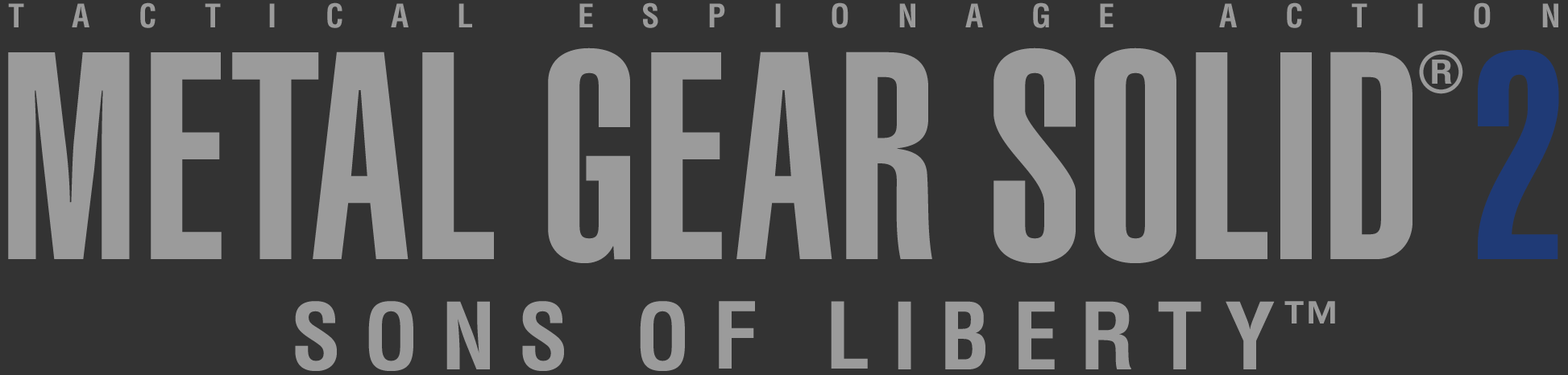
<style>
.page{position:relative;width:1568px;height:375px;background:#333333}
.page>*{position:absolute;margin:0}
.t1{font:31.6px "Helvetica-Condensed-Bold";letter-spacing:0.048em;color:#9b9b9b}
.t2{font:291px "Helvetica-UltraCompressed";letter-spacing:0.048em;color:#9b9b9b}
.t3{font:54.9px "Helvetica-Condensed-Bold";letter-spacing:0.048em;color:#9b9b9b}
.t4{font:291px "Helvetica-UltraCompressed";letter-spacing:0.048em;color:#1f3a76}
.t5{font:32.2px "Helvetica-Condensed-Bold";letter-spacing:0.048em;color:#9b9b9b;scale:1.21 1}
.t6{font:89px "Helvetica-Condensed-Bold";letter-spacing:0.048em;color:#9b9b9b}
.t7{font:90.4px "Helvetica-Condensed-Bold";letter-spacing:0.048em;color:#9b9b9b}
.t8{font:90px "Helvetica-Condensed-Bold";letter-spacing:0.048em;color:#9b9b9b}
.t9{font:89.7px "Helvetica-Condensed-Bold";letter-spacing:0.048em;color:#9b9b9b}
.t10{font:90.6px "Helvetica-Condensed-Bold";letter-spacing:0.048em;color:#9b9b9b}
.t11{font:54.1px "Helvetica-UltraCompressed";letter-spacing:0.048em;color:#9b9b9b;scale:1.04 1}
</style>
<div class="page">
<p class="t1" style="left:8px;top:3px;width:16px;height:24px">T</p>
<p class="t1" style="left:72px;top:3px;width:17px;height:24px">A</p>
<p class="t1" style="left:140px;top:2px;width:16px;height:26px">C</p>
<p class="t1" style="left:205px;top:3px;width:16px;height:24px">T</p>
<p class="t1" style="left:269px;top:3px;width:6px;height:24px">I</p>
<p class="t1" style="left:327px;top:2px;width:15px;height:26px">C</p>
<p class="t1" style="left:391px;top:3px;width:18px;height:24px">A</p>
<p class="t1" style="left:458px;top:3px;width:14px;height:24px">L</p>
<p class="t1" style="left:579px;top:3px;width:14px;height:24px">E</p>
<p class="t1" style="left:643px;top:2px;width:15px;height:26px">S</p>
<p class="t1" style="left:709px;top:3px;width:16px;height:24px">P</p>
<p class="t1" style="left:775px;top:3px;width:6px;height:24px">I</p>
<p class="t1" style="left:832px;top:2px;width:16px;height:26px">O</p>
<p class="t1" style="left:899px;top:3px;width:16px;height:24px">N</p>
<p class="t1" style="left:965px;top:3px;width:18px;height:24px">A</p>
<p class="t1" style="left:1033px;top:2px;width:16px;height:26px">G</p>
<p class="t1" style="left:1100px;top:3px;width:14px;height:24px">E</p>
<p class="t1" style="left:1219px;top:3px;width:18px;height:24px">A</p>
<p class="t1" style="left:1287px;top:2px;width:15px;height:26px">C</p>
<p class="t1" style="left:1351px;top:3px;width:16px;height:24px">T</p>
<p class="t1" style="left:1417px;top:3px;width:6px;height:24px">I</p>
<p class="t1" style="left:1474px;top:2px;width:17px;height:26px">O</p>
<p class="t1" style="left:1542px;top:3px;width:16px;height:24px">N</p>
<p class="t2" style="left:8px;top:52px;width:122px;height:207px">M</p>
<p class="t2" style="left:151px;top:52px;width:71px;height:207px">E</p>
<p class="t2" style="left:232px;top:52px;width:87px;height:207px">T</p>
<p class="t2" style="left:313px;top:52px;width:96px;height:207px">A</p>
<p class="t2" style="left:422px;top:52px;width:72px;height:207px">L</p>
<p class="t2" style="left:548px;top:48px;width:82px;height:215px">G</p>
<p class="t2" style="left:651px;top:52px;width:71px;height:207px">E</p>
<p class="t2" style="left:736px;top:52px;width:96px;height:207px">A</p>
<p class="t2" style="left:846px;top:52px;width:86px;height:207px">R</p>
<p class="t2" style="left:993px;top:48px;width:83px;height:215px">S</p>
<p class="t2" style="left:1094px;top:48px;width:82px;height:215px">O</p>
<p class="t2" style="left:1196px;top:52px;width:71px;height:207px">L</p>
<p class="t2" style="left:1330px;top:52px;width:82px;height:207px">D</p>
<p class="t3" style="left:1419px;top:50px;width:44px;height:44px">®</p>
<p class="t4" style="left:1478px;top:49px;width:81px;height:210px">2</p>
<p class="t5" style="left:1432px;top:60px;width:20px;height:24px">R</p>
<p class="t6" style="left:295px;top:301px;width:42px;height:70px">S</p>
<p class="t6" style="left:368px;top:301px;width:45px;height:70px">O</p>
<p class="t7" style="left:446px;top:301px;width:44px;height:69px">N</p>
<p class="t6" style="left:522px;top:301px;width:42px;height:70px">S</p>
<p class="t6" style="left:640px;top:301px;width:45px;height:70px">O</p>
<p class="t8" style="left:719px;top:301px;width:36px;height:68px">F</p>
<p class="t9" style="left:831px;top:301px;width:37px;height:68px">L</p>
<p class="t10" style="left:898px;top:301px;width:13px;height:69px">I</p>
<p class="t10" style="left:945px;top:301px;width:40px;height:69px">B</p>
<p class="t10" style="left:1018px;top:301px;width:37px;height:69px">E</p>
<p class="t10" style="left:1085px;top:301px;width:46px;height:69px">R</p>
<p class="t10" style="left:1158px;top:301px;width:43px;height:69px">T</p>
<p class="t10" style="left:1226px;top:301px;width:49px;height:69px">Y</p>
<p class="t11" style="left:1284px;top:301px;width:51px;height:23px">™</p>
</div>
